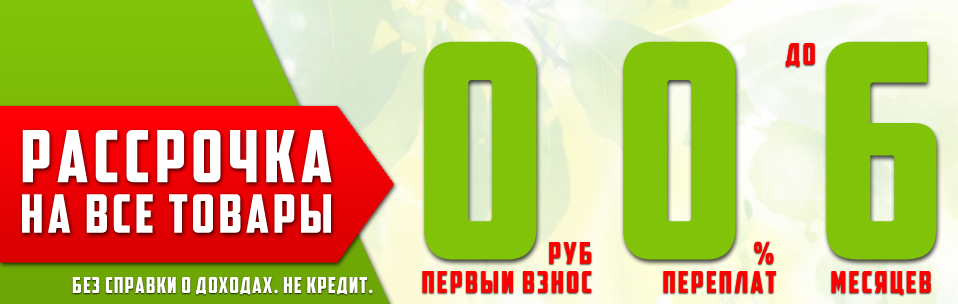
<style>
.page{position:relative;width:958px;height:304px;background:#81c308}
.page>*{position:absolute;margin:0}
.t1{font:300px "TheCapt";letter-spacing:0.075em;color:#81c308}
.t2{font:30px "TheCapt";letter-spacing:0.075em;color:#ff0000}
.t3{font:72px "TheCapt";letter-spacing:0.075em;color:#ffffff}
.t4{font:53px "TheCapt";letter-spacing:0.075em;color:#ffffff}
.t5{font:30px "TheCapt";letter-spacing:0.075em;color:#81c308}
.t6{font:22px "TheCapt";letter-spacing:0.05em;color:#fffffe}
</style>
<div class="page">
<p class="t1" style="left:424px;top:41px;width:113px;height:219px">0</p>
<p class="t1" style="left:623px;top:41px;width:113px;height:219px">0</p>
<p class="t1" style="left:826px;top:41px;width:111px;height:219px">6</p>
<p class="t2" style="left:785px;top:43px;width:30px;height:24px">до</p>
<p class="t3" style="left:22px;top:130px;width:310px;height:53px">РАССРОЧКА</p>
<p class="t4" style="left:22px;top:194px;width:309px;height:39px">на все товары</p>
<p class="t2" style="left:549px;top:242px;width:43px;height:22px">руб</p>
<p class="t2" style="left:754px;top:241px;width:20px;height:23px"><span class="t5"> </span>%</p>
<p class="t6" style="left:72px;top:277px;width:301px;height:18px">без справки о доходах. НЕ кредит.</p>
<p class="t2" style="left:422px;top:271px;width:170px;height:22px">первыи взнос</p>
<p class="t2" style="left:663px;top:271px;width:113px;height:22px"><span class="t5">       </span>переплат</p>
<p class="t2" style="left:831px;top:271px;width:100px;height:24px">месяцев</p>
</div>
